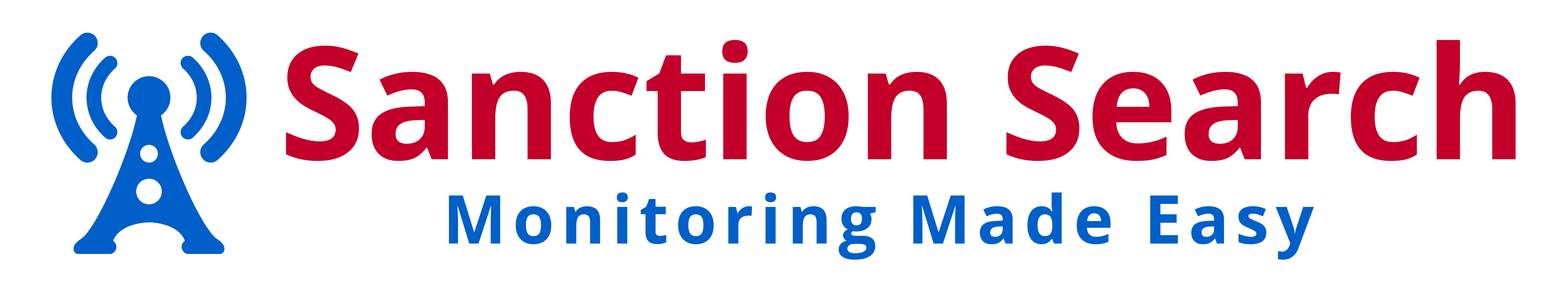
<style>
.page{position:relative;width:1568px;height:304px;background:#ffffff}
.page>*{position:absolute;margin:0}
.t1{font:156.6px "OpenSans-Bold";color:#c30029}
.t2{font:67.1px "OpenSans-Bold";letter-spacing:0.1em;color:#005fc9}
</style>
<div class="page">
<p class="t1" style="left:286px;top:40px;width:1230px;height:121px">Sanction Search</p>
<p class="t2" style="left:449px;top:192px;width:865px;height:67px">Monitoring Made Easy</p>
</div>
